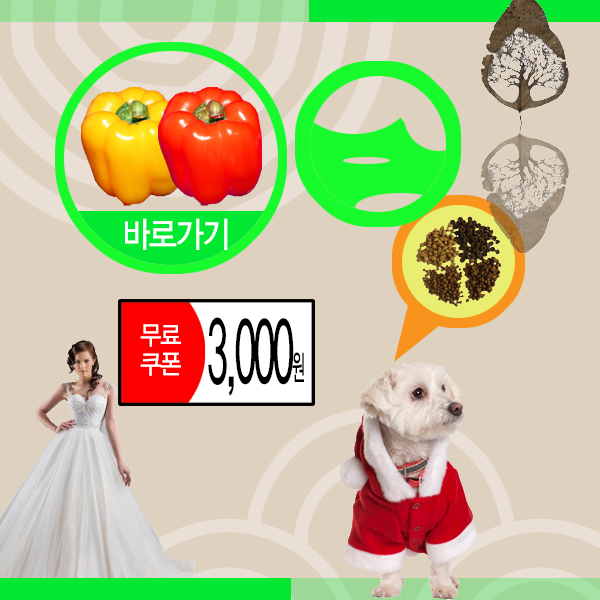
<style>
.page{position:relative;width:600px;height:600px;background:#ded1c0}
.page>*{position:absolute;margin:0}
.t1{font:35.4px "YDIYGO330";letter-spacing:-0.05em;color:#ffffff;scale:0.86 1}
.t2{font:88.4px "YDIYGO330";letter-spacing:-0.05em;color:#000000;scale:0.42 1}
.t3{font:34px "YDIYGO330";letter-spacing:-0.05em;color:#000000;scale:0.42 1}
.t4{font:26.6px "YDIYGO330";letter-spacing:-0.05em;color:#ffffff;scale:0.87 1}
</style>
<div class="page">
<p class="t1" style="left:125px;top:218px;width:103px;height:32px">바로가기</p>
<p class="t2" style="left:208px;top:317px;width:96px;height:79px">3,000<span class="t3">원</span></p>
<p class="t4" style="left:140px;top:324px;width:41px;height:52px">무료<br>쿠폰</p>
</div>
